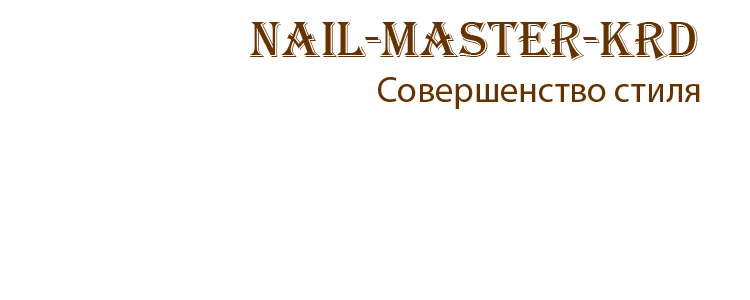
<style>
.page{position:relative;width:750px;height:300px;background:#ffffff}
.page>*{position:absolute;margin:0}
.t1{font:52px "Algerian";color:#663300}
.t2{font:36px "MyriadPro-Regular";color:#663300}
</style>
<div class="page">
<p class="t1" style="left:250px;top:22px;width:448px;height:39px">Nail-Master-Krd</p>
<p class="t2" style="left:378px;top:77px;width:322px;height:32px">Совершенство стиля</p>
</div>
